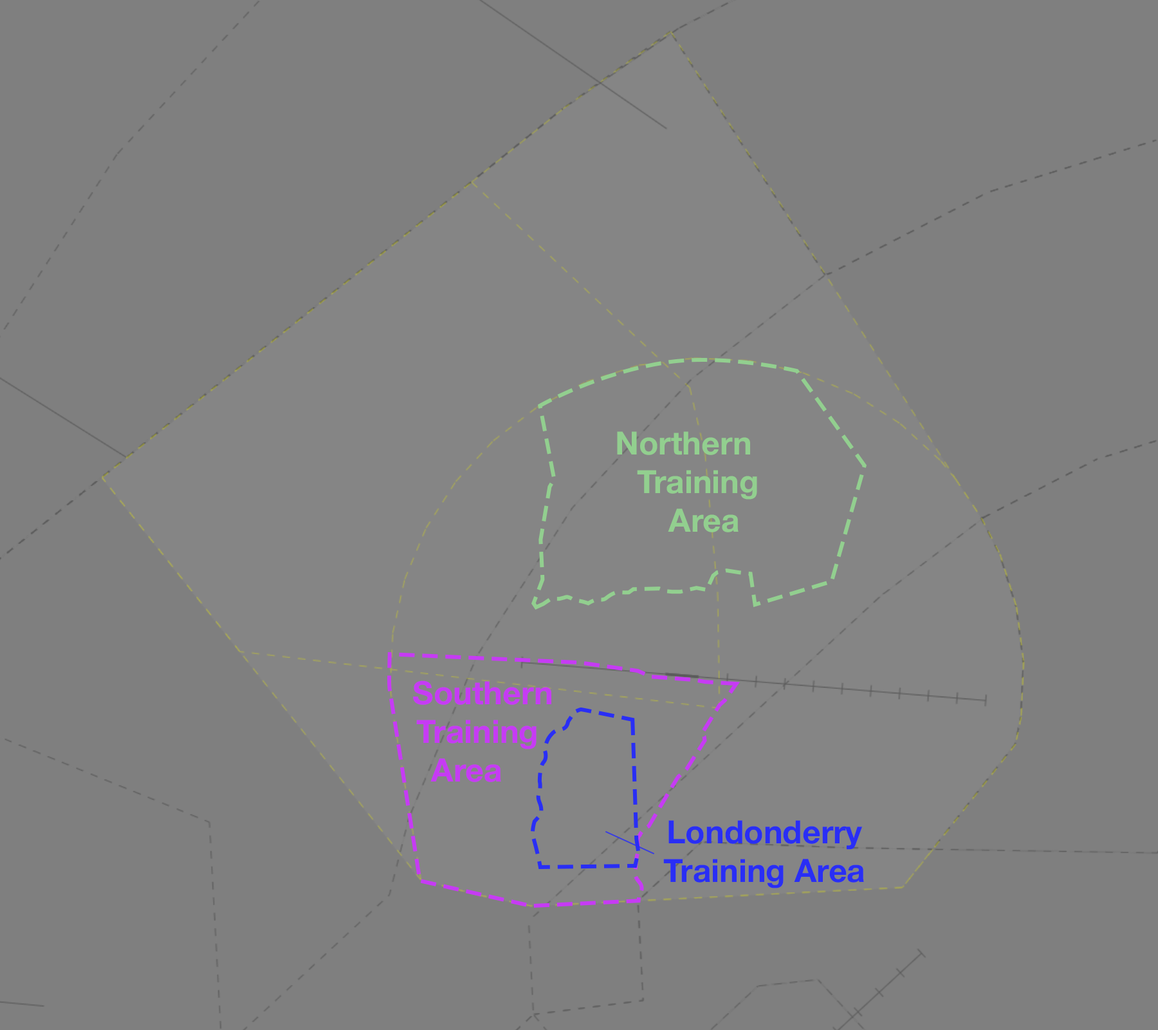
<style>
.page{position:relative;width:1158px;height:1030px;background:#7f7f7f}
.page>*{position:absolute;margin:0}
.t1{font:32.2px "HelveticaNeue-Bold";color:#92cf8f}
.t2{font:32.2px "HelveticaNeue-Bold";color:#c63bf4}
.t3{font:32.2px "HelveticaNeue-Bold";color:#292ef5}
</style>
<div class="page">
<p class="t1" style="left:617px;top:431px;width:140px;height:101px;text-align:center">Northern<br>Training<br>Area</p>
<p class="t2" style="left:413px;top:680px;width:138px;height:102px;text-align:center">Southern<br>Training<br>Area</p>
<p class="t3" style="left:663px;top:820px;width:201px;height:68px;text-align:center">Londonderry<br>Training Area</p>
</div>
